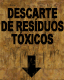
<style>
.page{position:relative;width:64px;height:80px}
.page>*{position:absolute;margin:0}
.t1{font:14px/13px "Arial-Black";letter-spacing:-0.09em;color:#050302;text-transform:uppercase;font-weight:bold;scale:0.65 1}
</style>
<div class="page">
<p class="t1" style="left:1px;top:7px;width:63px;height:38px;text-align:center">Descarte<br>de resíduos<br>tóxicos</p>
</div>
